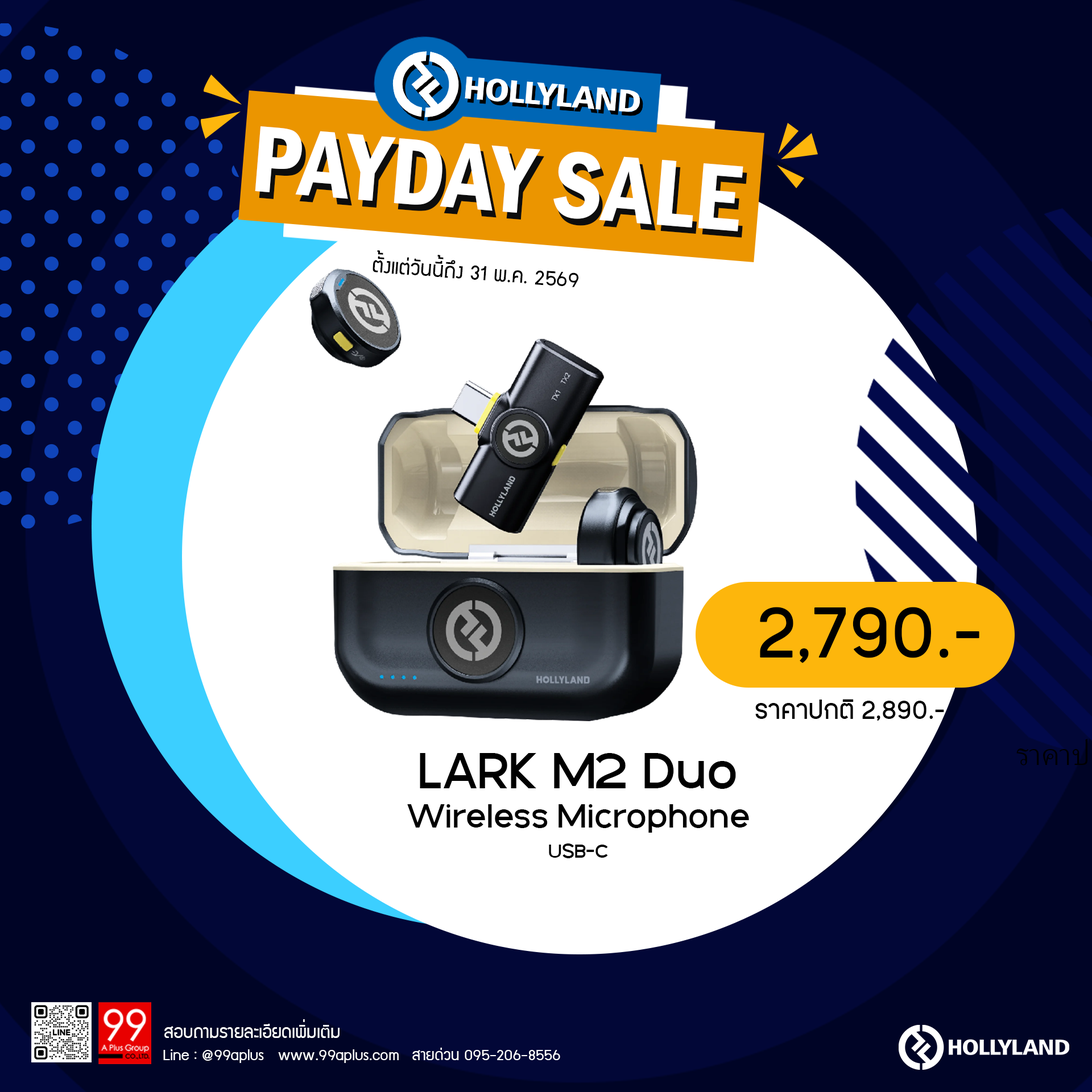
<style>
.page{position:relative;width:1092px;height:1092px;background:#ffffff}
.page>*{position:absolute;margin:0}
.t1{font:97.5px "FranklinGothic-DemiCond";color:#ffffff}
.t2{font:97.5px "FranklinGothic-DemiCond"}
.t3{font:23.2px "supermarket";color:#000000}
.t4{font:83.5px "PK-NakhonPathom-Demo";color:#000000}
.t5{font:30.3px "PK-NakhonPathom-Demo";color:#000000}
.t6{font:54px "GalakPro-Demo";color:#000000}
.t7{font:35.6px "GalakPro-Demo";color:#000000}
.t8{font:20.4px "GalakPro-Demo";color:#000000}
.t9{font:19.8px "supermarket";color:#ffffff}
.t10{font:17.2px "supermarket";color:#ffffff}
</style>
<div class="page">
<p class="t1" style="left:255px;top:126px;width:488px;height:105px;rotate:5deg">PAYDAY SALE</p>
<p class="t2" style="left:259px;top:133px;width:488px;height:105px;rotate:5deg">PAYDAY SALE</p>
<p class="t3" style="left:373px;top:250px;width:205px;height:37px;rotate:4deg">ตั้งแต่วันนี้ถึง 31 พ.ค. 2569</p>
<p class="t4" style="left:760px;top:607px;width:219px;height:56px">2,790.-</p>
<p class="t5" style="left:755px;top:699px;width:189px;height:22px">ราคาปกติ 2,890.-</p>
<p class="t6" style="left:420px;top:753px;width:316px;height:36px">LARK M2 Duo</p>
<p class="t7" style="left:407px;top:804px;width:342px;height:29px">Wireless Microphone</p>
<p class="t8" style="left:549px;top:843px;width:59px;height:15px">USB-C</p>
<p class="t9" style="left:164px;top:1019px;width:176px;height:19px">สอบถามรายละเอียดเพิ่มเติม</p>
<p class="t10" style="left:163px;top:1049px;width:236px;height:14px">Line : @99aplus   www.99aplus.com</p>
<p class="t10" style="left:412px;top:1048px;width:148px;height:12px">สายด่วน 095-206-8556</p>
</div>
